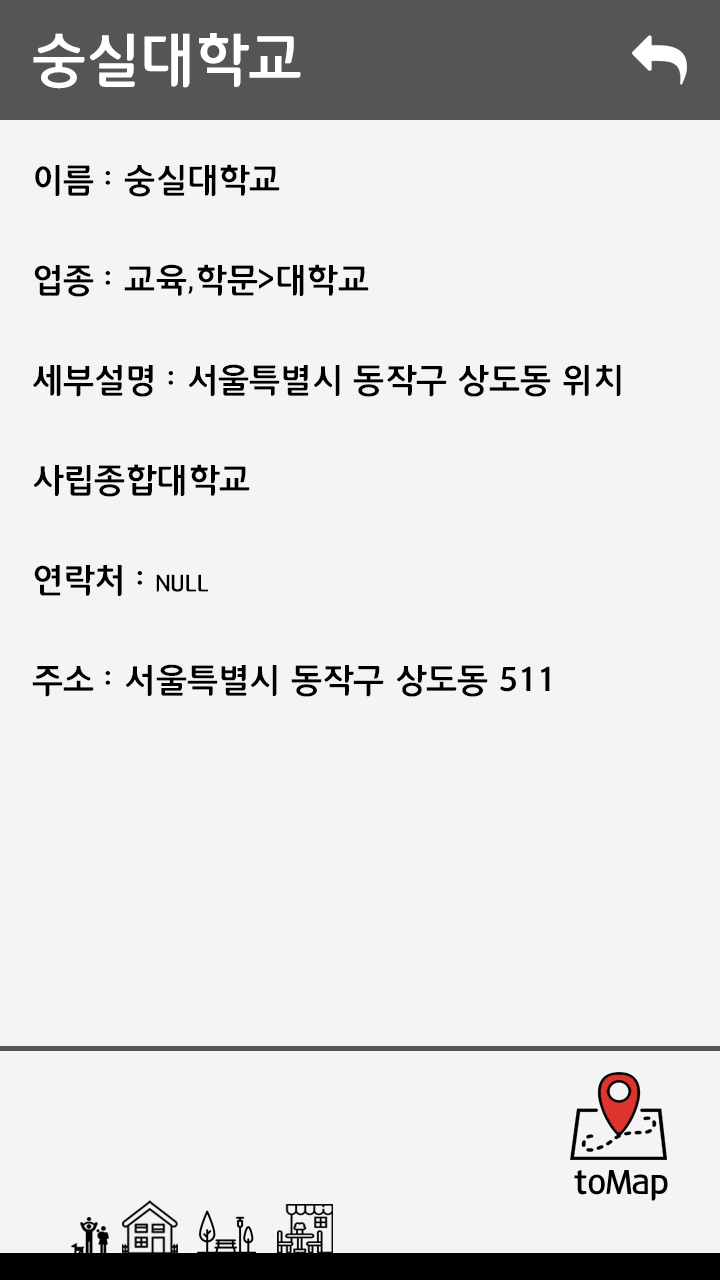
<style>
.page{position:relative;width:720px;height:1280px;background:#f4f4f4}
.page>*{position:absolute;margin:0}
.t1{font:60px "12LotteMartDreamBold";color:#ffffff}
.t2{font:34.7px/100px "12LotteMartDreamBold";color:#000000;font-variant:small-caps}
</style>
<div class="page">
<p class="t1" style="left:33px;top:33px;width:268px;height:56px">숭실대학교</p>
<p class="t2" style="left:32px;top:164px;width:589px;height:533px">이름 : 숭실대학교<br>업종 : 교육,학문&gt;대학교<br>세부설명 : 서울특별시 동작구 상도동 위치<br>사립종합대학교<br>연락처 : null<br>주소 : 서울특별시 동작구 상도동 511</p>
</div>
